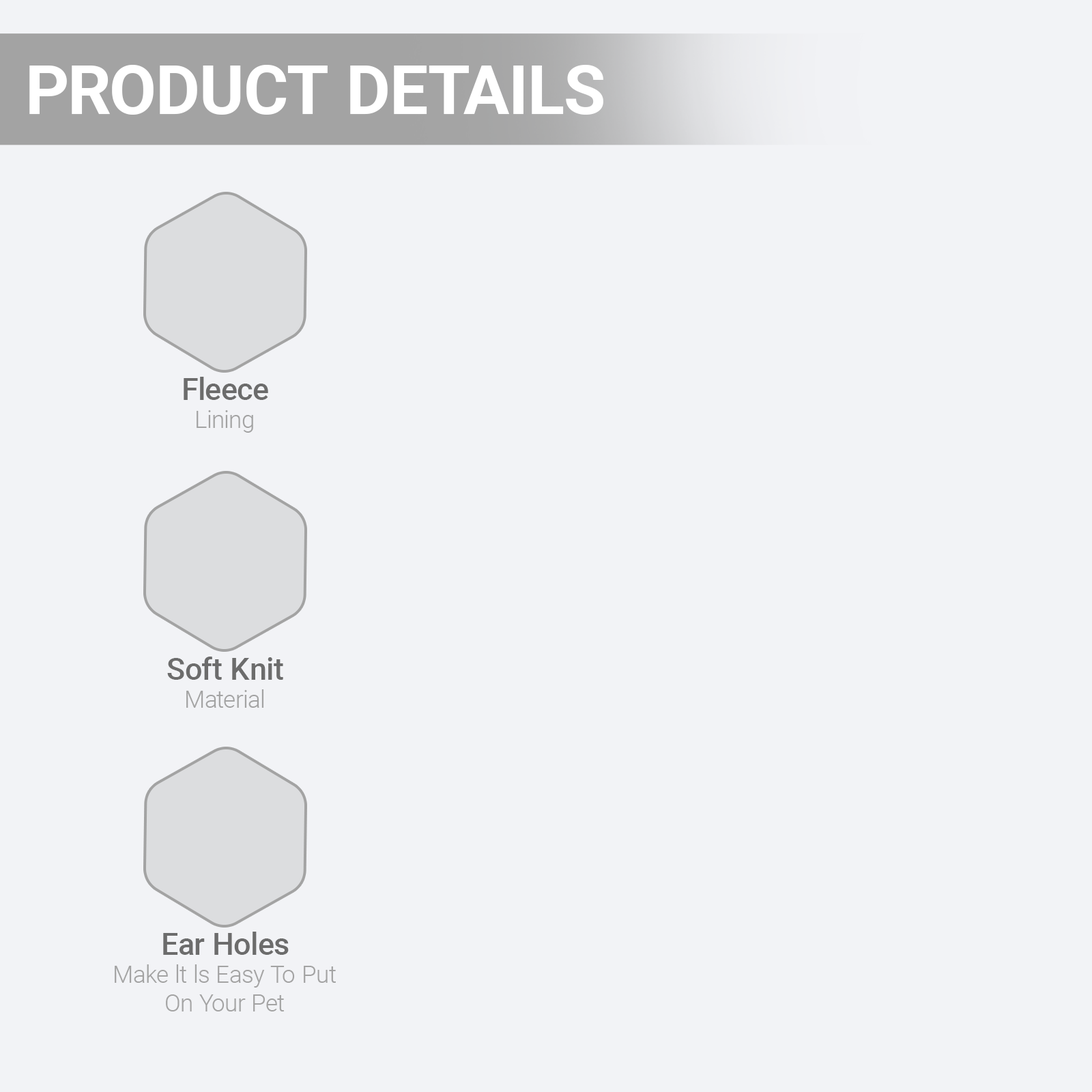
<style>
.page{position:relative;width:1092px;height:1092px;background:#f2f3f6}
.page>*{position:absolute;margin:0}
.t1{font:68.4px "Roboto-Bold";color:#ffffff}
.t2{font:30.7px "Roboto-Medium";color:#6c6c6c}
.t3{font:24.2px "Roboto-Light";color:#a3a3a3}
</style>
<div class="page">
<p class="t1" style="left:29px;top:65px;width:574px;height:50px">PRODUCT DETAILS</p>
<p class="t2" style="left:184px;top:377px;width:84px;height:23px">Fleece</p>
<p class="t3" style="left:197px;top:410px;width:56px;height:23px">Lining</p>
<p class="t2" style="left:167px;top:657px;width:116px;height:23px">Soft Knit</p>
<p class="t3" style="left:186px;top:689px;width:78px;height:19px">Material</p>
<p class="t2" style="left:163px;top:932px;width:126px;height:23px">Ear Holes</p>
<p class="t3" style="left:115px;top:964px;width:221px;height:47px;text-align:center">Make lt ls Easy To Put<br>On Your Pet</p>
</div>
